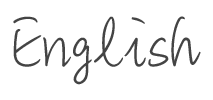
<style>
.page{position:relative;width:213px;height:100px;background:#ffffff}
.page>*{position:absolute;margin:0}
.t1{font:75px "MLingWaiMedium-SC";color:#444444}
</style>
<div class="page">
<p class="t1" style="left:13px;top:16px;width:188px;height:69px">English</p>
</div>
